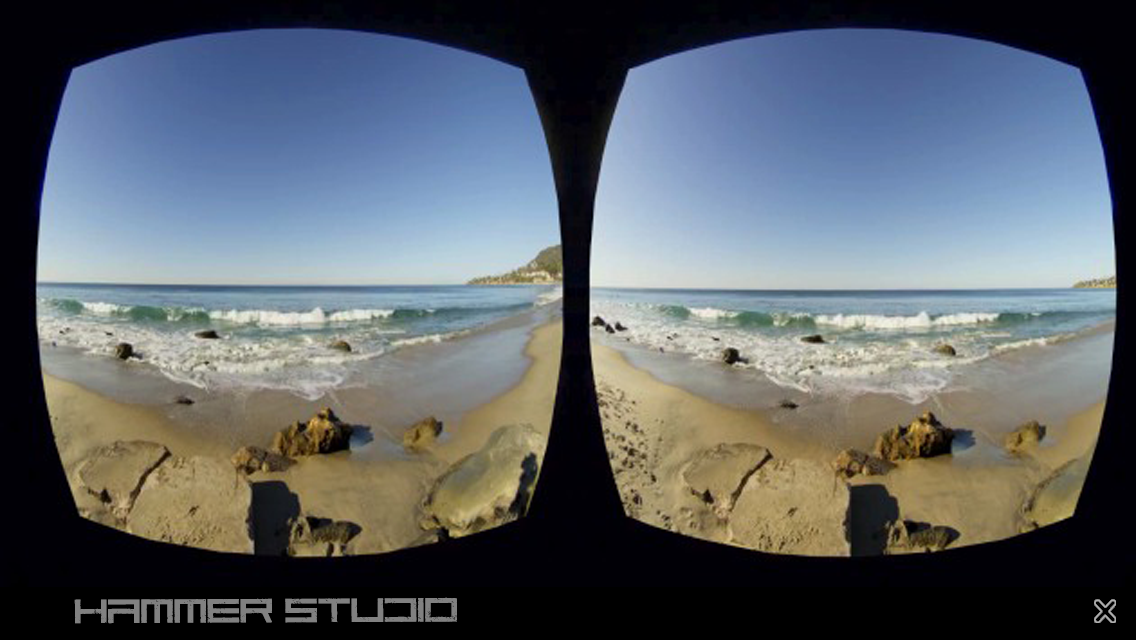
<style>
.page{position:relative;width:1136px;height:640px}
.page>*{position:absolute;margin:0}
.t1{font:42px "CodePredators-Regular";color:#818181;scale:1.13 1}
</style>
<div class="page">
<p class="t1" style="left:74px;top:597px;width:383px;height:27px">Hammer Studio</p>
</div>
